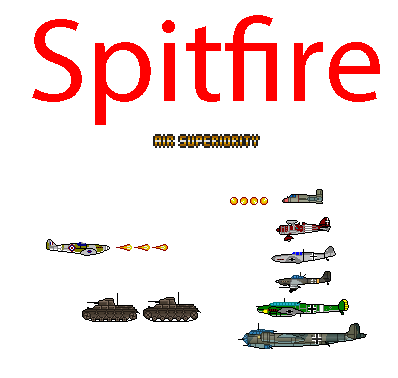
<style>
.page{position:relative;width:398px;height:378px;background:#ffffff}
.page>*{position:absolute;margin:0}
.t1{font:120px "MyriadPro-Regular";color:#ff0000}
</style>
<div class="page">
<p class="t1" style="left:32px;top:15px;width:348px;height:110px">Spitfire</p>
</div>
